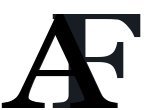
<style>
.page{position:relative;width:150px;height:110px;background:#ffffff}
.page>*{position:absolute;margin:0}
.t1{font:135px "Georgia";letter-spacing:-0.42em;color:#000000;scale:1.19 1}
.t2{font:135px "Georgia";letter-spacing:-0.42em;scale:1.19 1}
</style>
<div class="page">
<p class="t1" style="left:1px;top:14px;width:116px;height:94px">A</p>
<p class="t2" style="left:2px;top:14px;width:139px;height:94px">AF</p>
</div>
